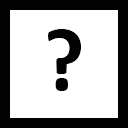
<style>
.page{position:relative;width:128px;height:128px;background:#ffffff}
.page>*{position:absolute;margin:0}
.t1{font:90px "Calibri-Bold";color:#020202}
</style>
<div class="page">
<p class="t1" style="left:48px;top:29px;width:33px;height:62px">?</p>
</div>
